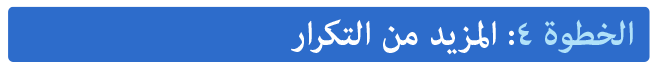
<style>
.page{position:relative;width:656px;height:72px;background:#2d6ccb}
.page>*{position:absolute;margin:0}
.t1{font:48px "AdobeArabic-Bold";color:#ffffff}
.t2{font:48px "AdobeArabic-Bold";color:#b0e1f9}
</style>
<div class="page">
<p class="t1" style="left:291px;top:19px;width:342px;height:36px"><span class="t2">الخطوة ٤</span>: المزيد من التكرار</p>
</div>
